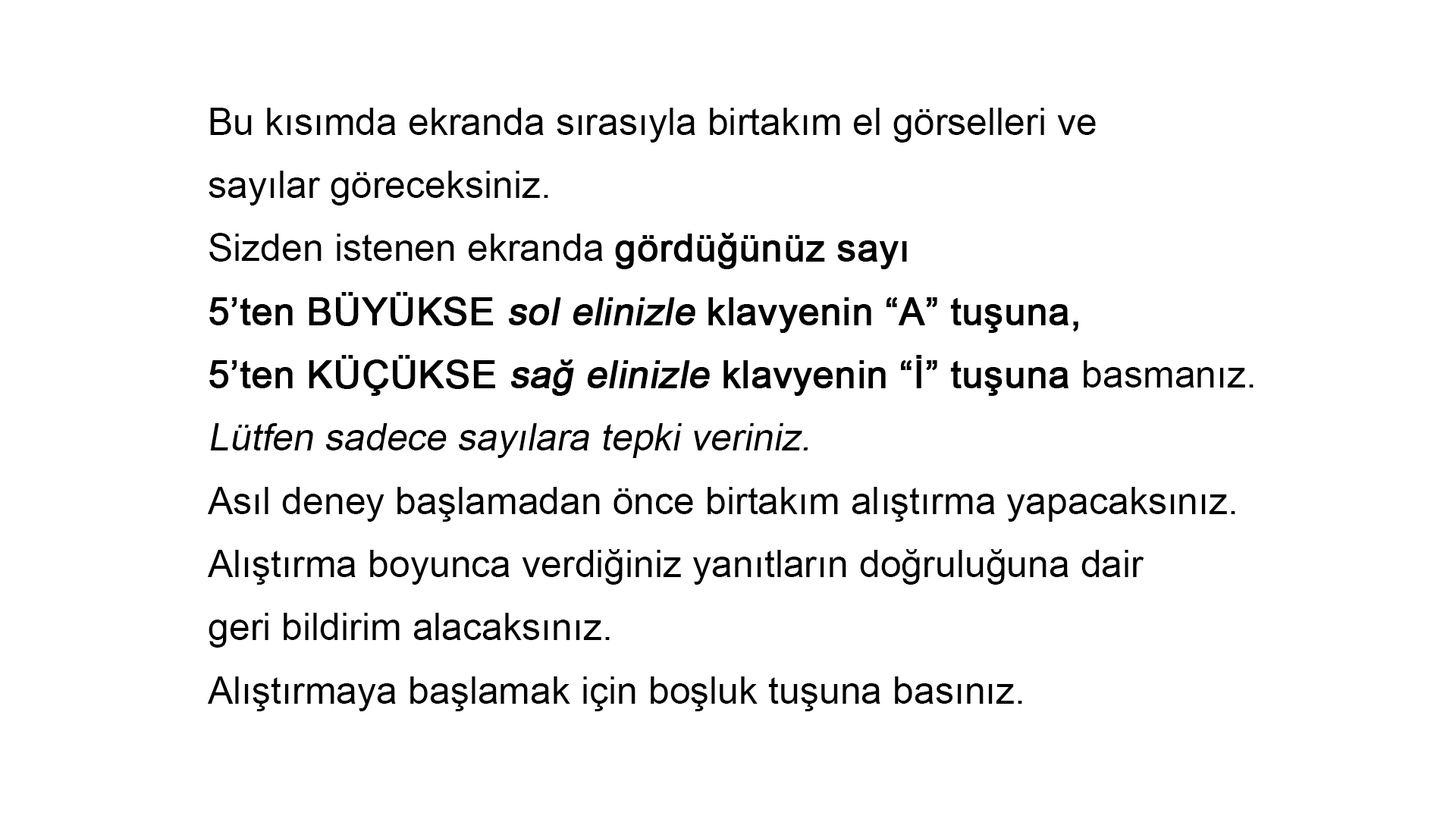
<style>
.page{position:relative;width:1456px;height:819px;background:#ffffff}
.page>*{position:absolute;margin:0}
.t1{font:37.9px/63.2px "ArialMT";color:#000000}
.t2{font:37.9px/63.2px "ArialMT";color:#000000;font-weight:bold}
.t3{font:37.9px/63.2px "ArialMT";color:#000000;font-weight:bold;font-style:italic}
.t4{font:37.9px/63.2px "ArialMT";color:#000000;font-style:italic}
</style>
<div class="page">
<p class="t1" style="left:208px;top:108px;width:1046px;height:603px">Bu kısımda ekranda sırasıyla birtakım el görselleri ve<br>sayılar göreceksiniz.<br>Sizden istenen ekranda <span class="t2">gördüğünüz sayı <br>5’ten BÜYÜKSE </span><span class="t3">sol elinizle </span><span class="t2">klavyenin “A” tuşuna, <br>5’ten KÜÇÜKSE </span><span class="t3">sağ elinizle </span><span class="t2">klavyenin “İ” tuşuna </span>basmanız.<br><span class="t4">Lütfen sadece sayılara tepki veriniz.<br></span>Asıl deney başlamadan önce birtakım alıştırma yapacaksınız.<br>Alıştırma boyunca verdiğiniz yanıtların doğruluğuna dair<br>geri bildirim alacaksınız.<br>Alıştırmaya başlamak için boşluk tuşuna basınız.</p>
</div>
